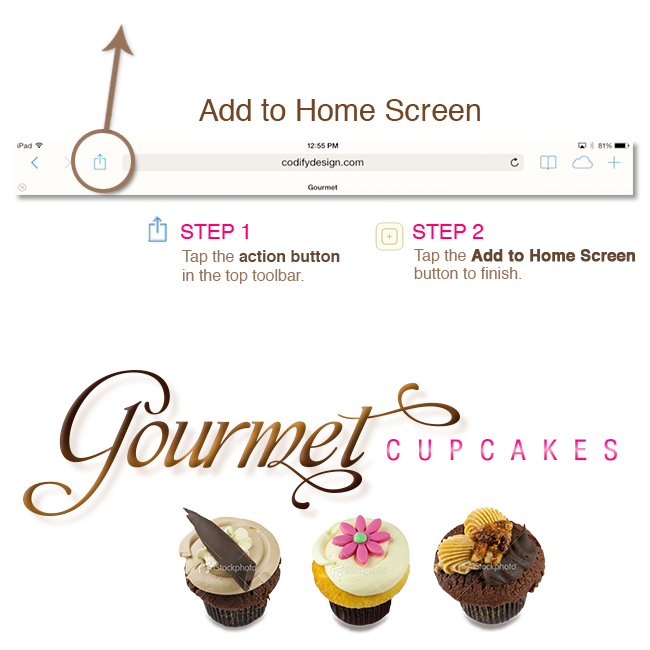
<style>
.page{position:relative;width:650px;height:650px;background:#ffffff}
.page>*{position:absolute;margin:0}
.t1{font:30.4px "Helvetica";color:#724622}
.t2{font:21px "Helvetica";color:#fe006f}
.t3{font:16px/19px "Helvetica";color:#97735a}
.t4{font:16px/19px "Helvetica-Bold";color:#664731}
.t5{font:16px/18px "Helvetica-Bold";color:#654630;font-weight:bold}
.t6{font:16px/18px "Helvetica";color:#97735a}
.t7{font:28.8px "HelveticaNeueLTStd-Cn";letter-spacing:0.58em}
</style>
<div class="page">
<p class="t1" style="left:199px;top:99px;width:281px;height:22px">Add to Home Screen</p>
<p class="t2" style="left:181px;top:224px;width:67px;height:15px">STEP 1</p>
<p class="t2" style="left:413px;top:224px;width:71px;height:15px">STEP 2</p>
<p class="t3" style="left:182px;top:250px;width:158px;height:34px">Tap the <span class="t4">action button</span><br>in the top toolbar.</p>
<p class="t5" style="left:414px;top:249px;width:221px;height:30px"><span class="t6">Tap the </span>Add to Home Screen<br><span class="t6">button to finish.</span></p>
<p class="t7" style="left:386px;top:439px;width:231px;height:22px">CUPCAKES</p>
</div>
